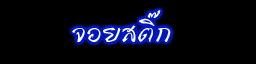
<style>
.page{position:relative;width:256px;height:64px;background:#000000}
.page>*{position:absolute;margin:0}
.t1{font:36px "DsSupasawatD";color:#ffffff}
</style>
<div class="page">
<p class="t1" style="left:72px;top:10px;width:99px;height:32px">¨ÍÂÊµÔê¡</p>
</div>
